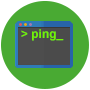
<style>
.page{position:relative;width:90px;height:90px;background:#49aa33}
.page>*{position:absolute;margin:0}
.t1{font:12px "Arial-BoldMT";color:#71f503}
</style>
<div class="page">
<p class="t1" style="left:21px;top:29px;width:43px;height:12px">&gt; ping_</p>
</div>
